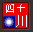
<style>
.page{position:relative;width:33px;height:32px;background:#f20000}
.page>*{position:absolute;margin:0}
.t1{font:10.4px "SimSun";color:#ffffff}
.t2{font:11.7px "SimSun";color:#ffffff}
</style>
<div class="page">
<p class="t1" style="left:6px;top:4px;width:19px;height:9px">四十</p>
<p class="t2" style="left:16px;top:15px;width:11px;height:12px">川</p>
</div>
